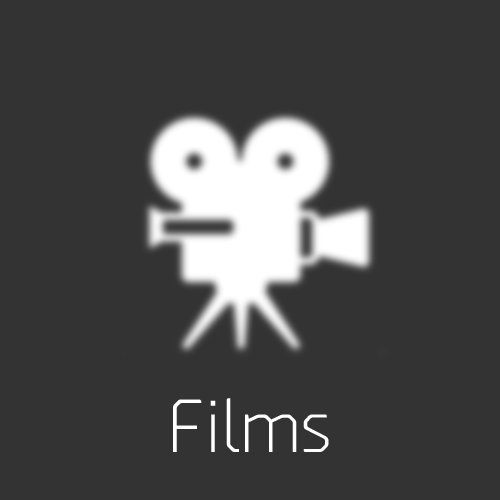
<style>
.page{position:relative;width:500px;height:500px;background:#333333}
.page>*{position:absolute;margin:0}
.t1{font:75px "Borda-Regular9";color:#ffffff}
</style>
<div class="page">
<p class="t1" style="left:173px;top:398px;width:156px;height:54px">Films</p>
</div>
